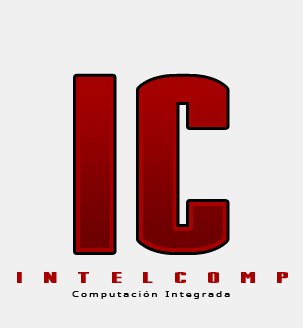
<style>
.page{position:relative;width:303px;height:328px;background:#f0f0f0}
.page>*{position:absolute;margin:0}
.t1{font:256px "Stark"}
.t2{font:16px "Stark";color:#a60000;scale:2 1}
.t3{font:8px "Verdana";letter-spacing:0.2em;color:#000000;scale:1.25 1}
</style>
<div class="page">
<p class="t1" style="left:76px;top:76px;width:151px;height:176px">IC</p>
<p class="t2" style="left:17px;top:272px;width:271px;height:11px">I  N  T  E  L  C  O  M  P</p>
<p class="t3" style="left:72px;top:291px;width:158px;height:8px">Computación Integrada</p>
</div>
